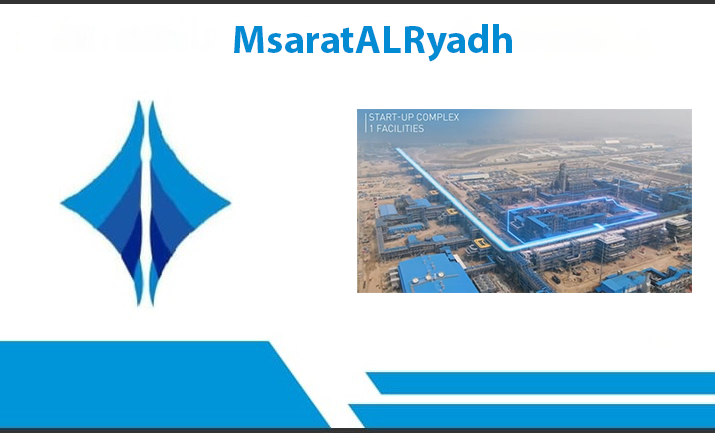
<style>
.page{position:relative;width:715px;height:433px;background:#ffffff}
.page>*{position:absolute;margin:0}
.t1{font:40px "MyriadPro-Bold";color:#028bd3}
</style>
<div class="page">
<p class="t1" style="left:234px;top:24px;width:278px;height:38px">MsaratALRyadh</p>
</div>
